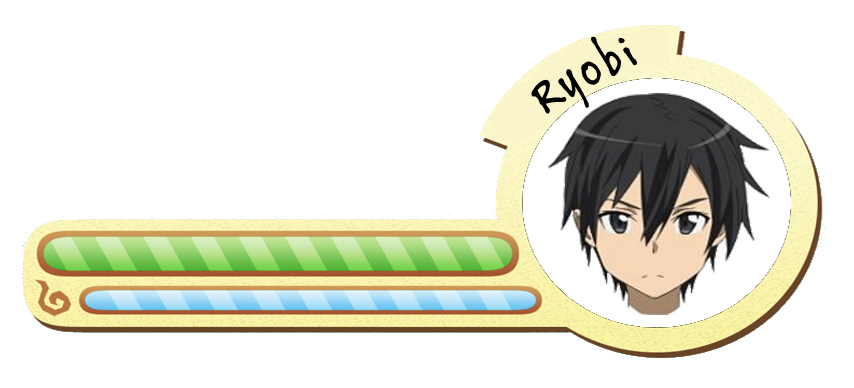
<style>
.page{position:relative;width:854px;height:388px;background:#ffffff}
.page>*{position:absolute;margin:0}
.t1{font:44.9px "BuxtonSketch";letter-spacing:0.1em;color:#000000}
</style>
<div class="page">
<p class="t1" style="left:531px;top:36px;width:106px;height:78px;rotate:-28deg">Ryobi</p>
</div>
